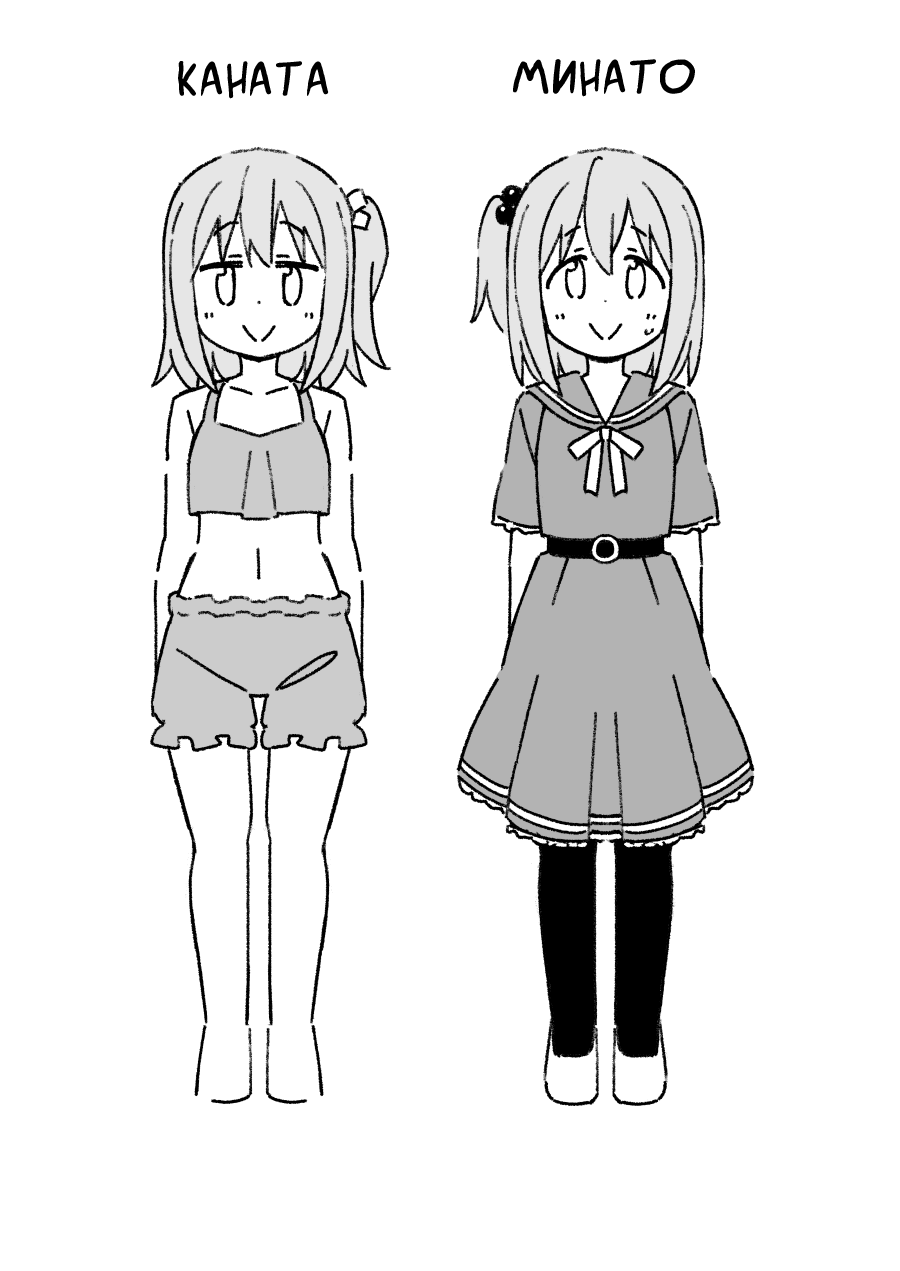
<style>
.page{position:relative;width:900px;height:1271px;background:#ffffff}
.page>*{position:absolute;margin:0}
.t1{font:50px "SuperWebcomicBros.Rusbyyakustick";color:#000000}
</style>
<div class="page">
<p class="t1" style="left:178px;top:61px;width:151px;height:38px">Каната</p>
<p class="t1" style="left:513px;top:59px;width:182px;height:38px">Минато</p>
</div>
